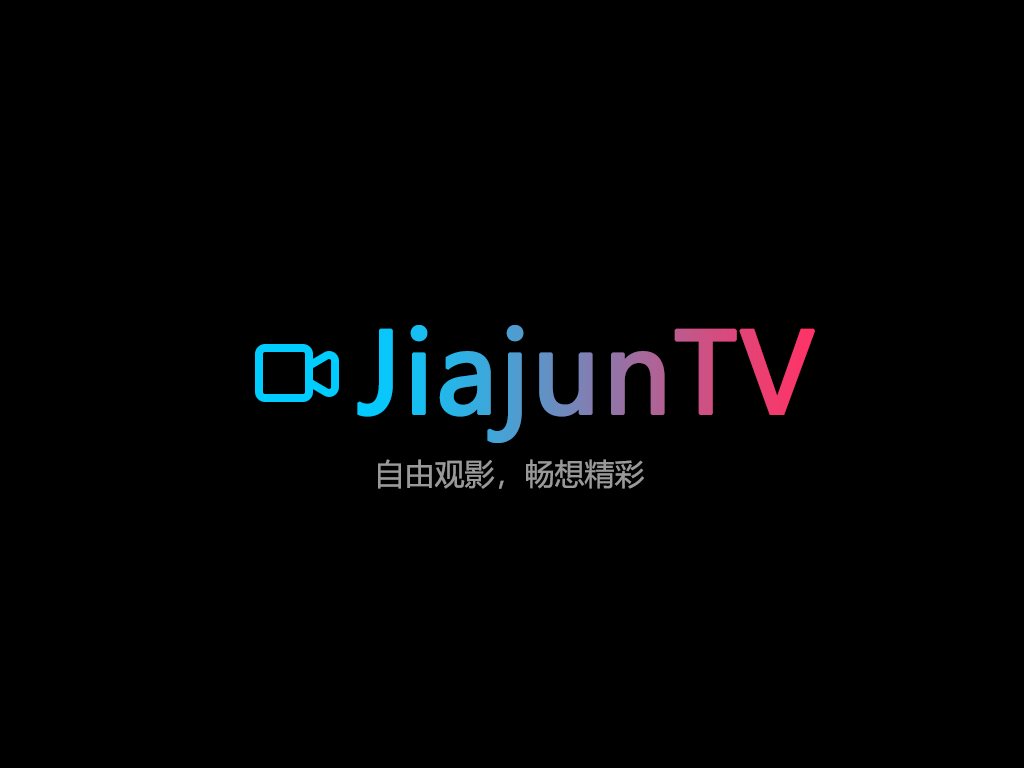
<style>
.page{position:relative;width:1024px;height:768px;background:#000000}
.page>*{position:absolute;margin:0}
.t1{font:110px "MicrosoftYaHei";font-weight:bold}
.t2{font:30px "MicrosoftYaHei";color:#999999}
</style>
<div class="page">
<p class="t1" style="left:357px;top:325px;width:458px;height:118px">JiajunTV</p>
<p class="t2" style="left:378px;top:459px;width:266px;height:30px">自由观影，畅想精彩</p>
</div>
